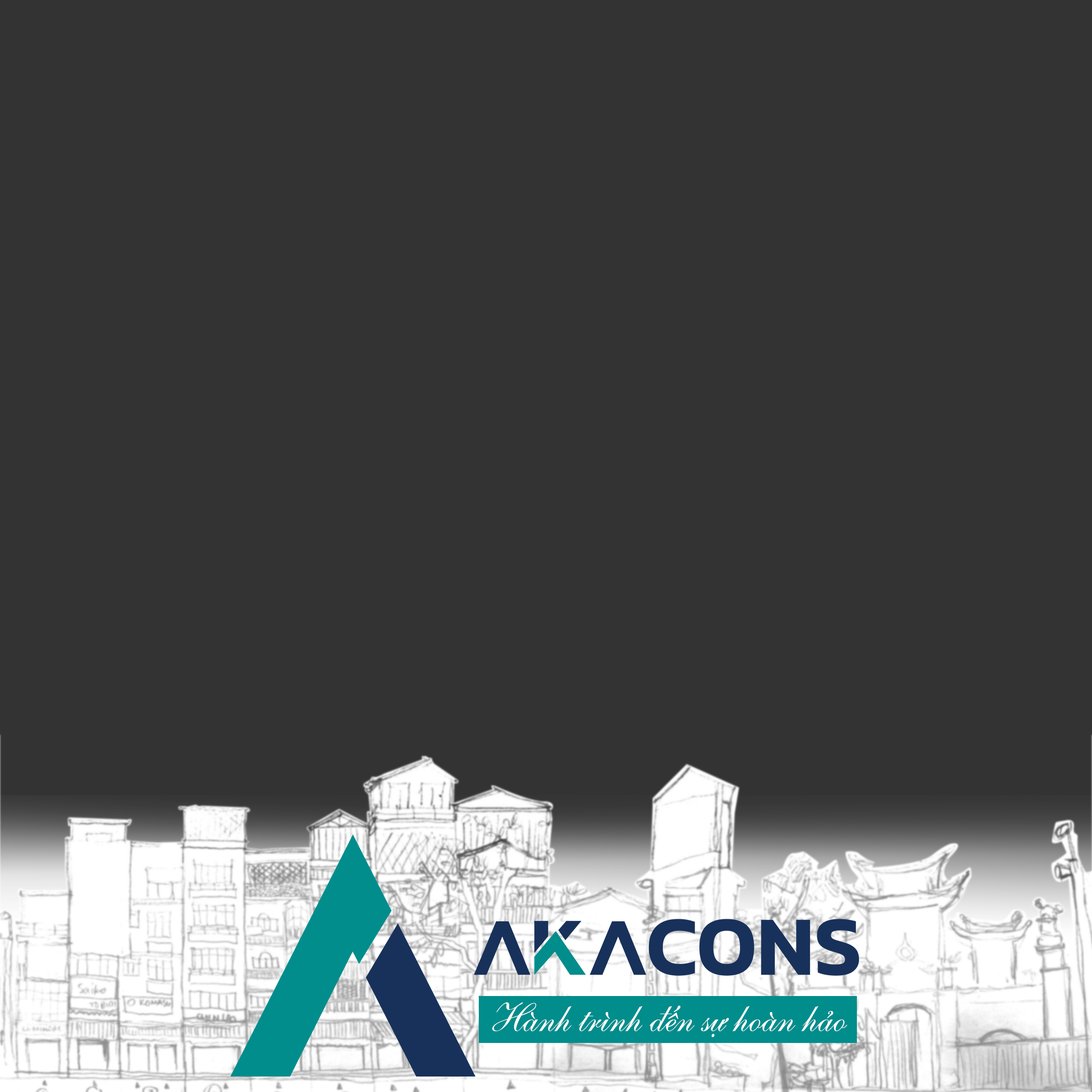
<style>
.page{position:relative;width:1092px;height:1092px;background:#333333}
.page>*{position:absolute;margin:0}
.t1{font:39.4px "UVNKeChuyen1";color:#ffffff}
</style>
<div class="page">
<p class="t1" style="left:492px;top:1002px;width:355px;height:35px">Hành trình đến sự hoàn hảo</p>
</div>
